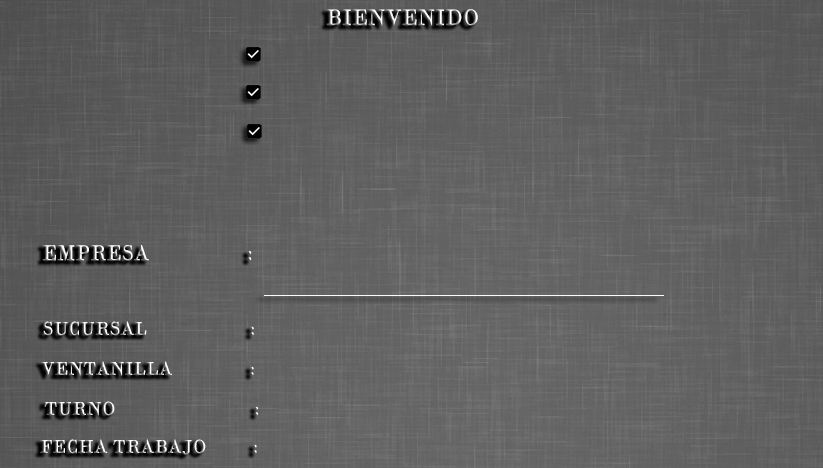
<style>
.page{position:relative;width:823px;height:468px}
.page>*{position:absolute;margin:0}
.t1{font:22.6px "BodoniMT";font-weight:bold}
.t2{font:21.7px "BodoniMT";font-weight:bold;scale:0.97 1}
.t3{font:19px "BodoniMT";font-weight:bold}
</style>
<div class="page">
<p class="t1" style="left:326px;top:9px;width:152px;height:17px">BIENVENIDO</p>
<p class="t2" style="left:42px;top:245px;width:210px;height:16px">EMPRESA                 :</p>
<p class="t3" style="left:43px;top:321px;width:211px;height:15px">SUCURSAL                    :</p>
<p class="t3" style="left:41px;top:361px;width:213px;height:15px">VENTANILLA               :</p>
<p class="t3" style="left:44px;top:401px;width:214px;height:15px">TURNO                           :</p>
<p class="t3" style="left:40px;top:439px;width:217px;height:16px">FECHA TRABAJO         :</p>
</div>
